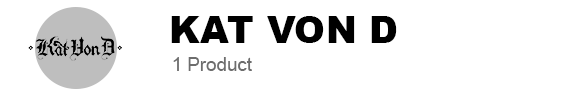
<style>
.page{position:relative;width:587px;height:95px;background:#ffffff}
.page>*{position:absolute;margin:0}
.t1{font:37.5px "Arial-Black";color:#000000}
.t2{font:18.7px "ArialMT";color:#6d6d6d}
</style>
<div class="page">
<p class="t1" style="left:171px;top:16px;width:226px;height:27px">KAT VON D</p>
<p class="t2" style="left:173px;top:57px;width:79px;height:14px">1 Product</p>
</div>
